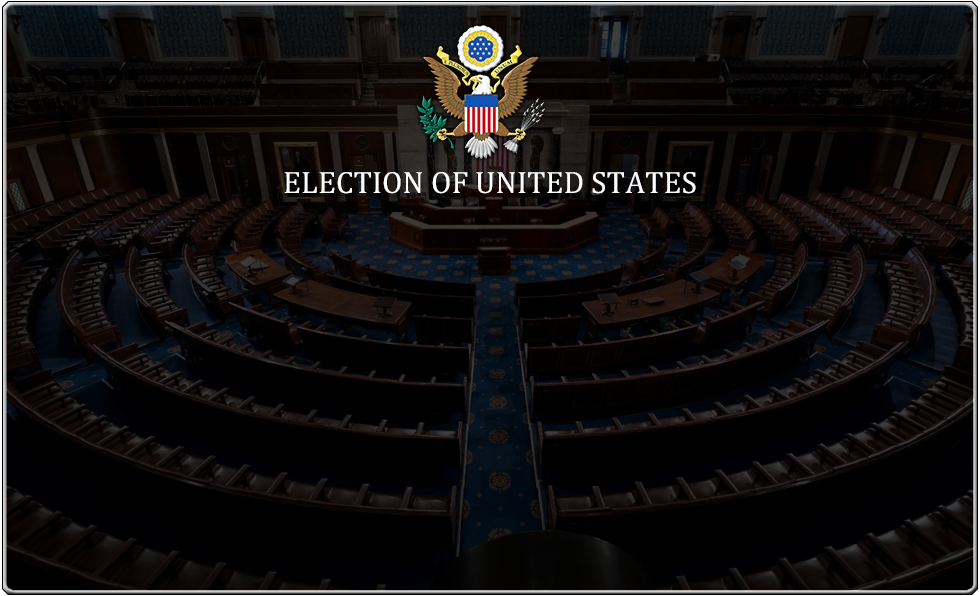
<style>
.page{position:relative;width:980px;height:596px}
.page>*{position:absolute;margin:0}
.t1{font:31.2px "CambriaMath";color:#ffffff}
</style>
<div class="page">
<p class="t1" style="left:284px;top:172px;width:412px;height:22px">ELECTION OF UNITED STATES</p>
</div>
